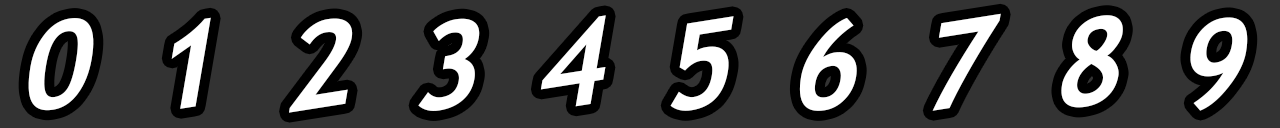
<style>
.page{position:relative;width:1280px;height:128px;background:#333333}
.page>*{position:absolute;margin:0}
.t1{font:120px "TrebuchetMS-Bold";color:#ffffff;font-style:italic}
</style>
<div class="page">
<p class="t1" style="left:171px;top:17px;width:40px;height:92px;rotate:-9deg">1</p>
<p class="t1" style="left:540px;top:15px;width:66px;height:92px;rotate:-9deg">4</p>
<p class="t1" style="left:670px;top:16px;width:64px;height:95px;rotate:-9deg">5</p>
<p class="t1" style="left:799px;top:17px;width:58px;height:94px;rotate:-9deg">6</p>
<p class="t1" style="left:932px;top:13px;width:69px;height:98px;rotate:-9deg">7</p>
<p class="t1" style="left:1061px;top:15px;width:62px;height:93px;rotate:-9deg">8</p>
<p class="t1" style="left:1190px;top:17px;width:58px;height:94px;rotate:-9deg">9</p>
<p class="t1" style="left:28px;top:18px;width:66px;height:93px;rotate:-9deg">0</p>
<p class="t1" style="left:289px;top:18px;width:64px;height:95px;rotate:-9deg">2</p>
<p class="t1" style="left:418px;top:18px;width:62px;height:93px;rotate:-9deg">3</p>
</div>
